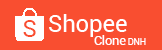
<style>
.page{position:relative;width:162px;height:50px;background:#f94e30}
.page>*{position:absolute;margin:0}
.t1{font:23.7px "Roboto-Regular";color:#ffffff}
.t2{font:23.7px "Roboto-Regular";color:#f94e30}
.t3{font:12.5px "Roboto-Regular";color:#ffffff}
.t4{font:12.4px "Roboto-Regular";color:#ffffff}
.t5{font:8.7px "Roboto-Regular";color:#ffffff}
</style>
<div class="page">
<p class="t1" style="left:49px;top:14px;width:78px;height:23px">Shopee</p>
<p class="t2" style="left:23px;top:20px;width:13px;height:17px">S</p>
<p class="t3" style="left:94px;top:35px;width:52px;height:10px"><span class="t4"><br></span>Clone <span class="t5">DNH</span></p>
</div>
